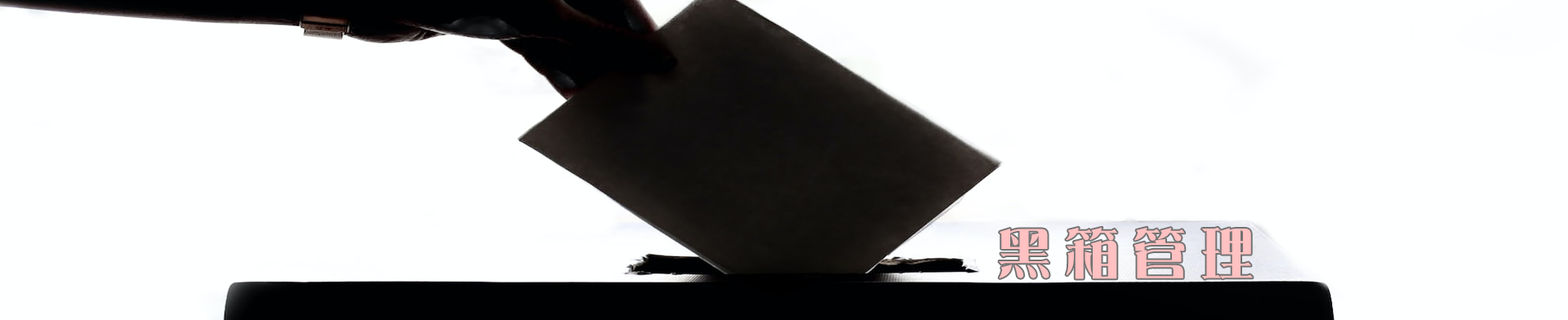
<style>
.page{position:relative;width:1568px;height:320px;background:#feffff}
.page>*{position:absolute;margin:0}
.t1{font:54.2px "DFYeaSongStd-W9";letter-spacing:0.26em;color:#ffc1c1}
</style>
<div class="page">
<p class="t1" style="left:999px;top:227px;width:254px;height:52px">黑箱管理</p>
</div>
